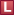
<style>
.page{position:relative;width:15px;height:15px}
.page>*{position:absolute;margin:0}
.t1{font:14px "HelveticaNeue-Boldotf";color:#ffffff}
</style>
<div class="page">
<p class="t1" style="left:4px;top:1px;width:8px;height:11px">L</p>
</div>
